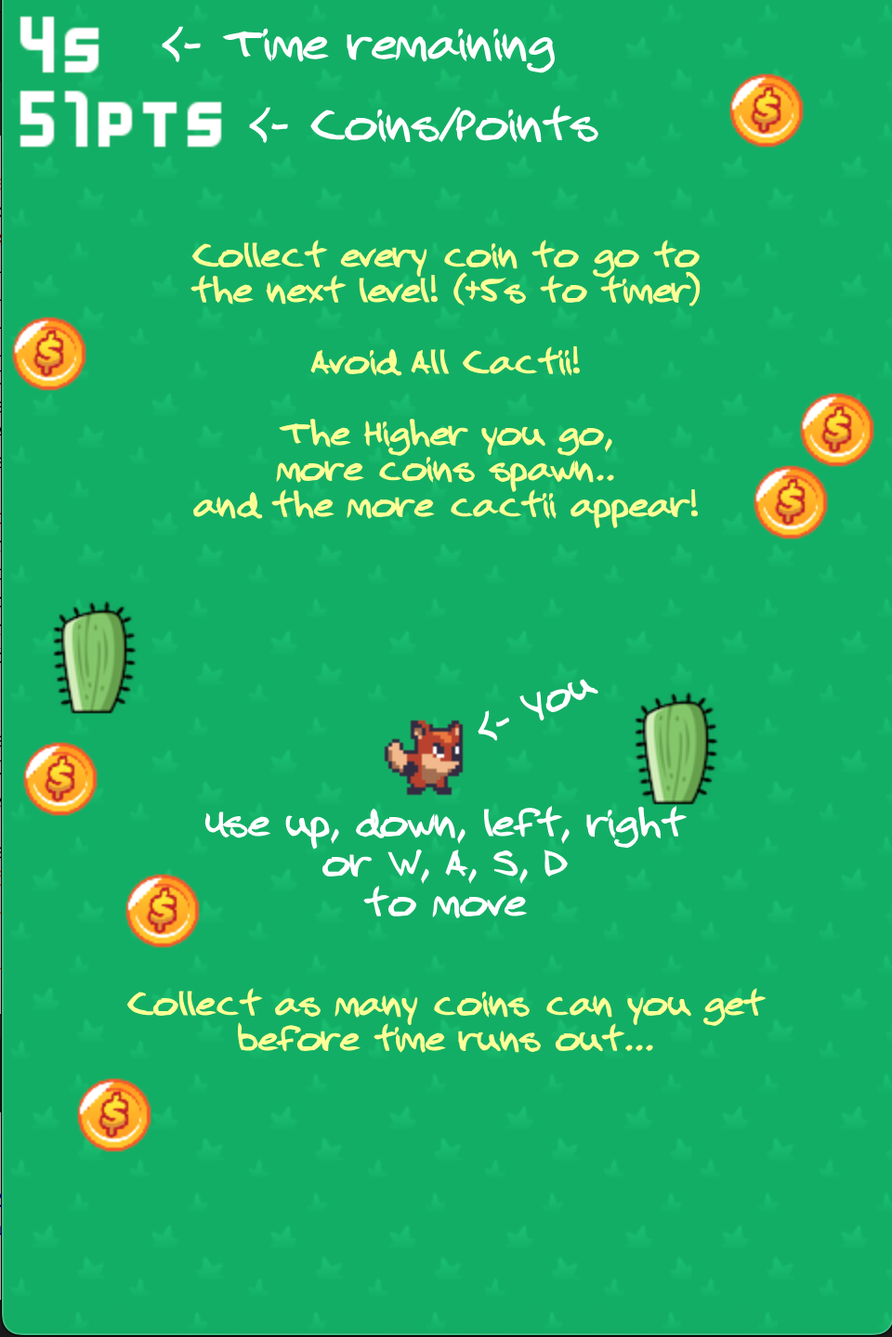
<style>
.page{position:relative;width:892px;height:1337px;background:#13ae65}
.page>*{position:absolute;margin:0}
.t1{font:39px "2Dumb";color:#ffffff}
.t2{font:29.7px "2Dumb";color:#fdffa4}
.t3{font:33.4px "2Dumb";color:#ffffff}
</style>
<div class="page">
<p class="t1" style="left:161px;top:25px;width:395px;height:49px">&lt;- Time remaining</p>
<p class="t1" style="left:248px;top:104px;width:351px;height:40px">&lt;- Coins/Points</p>
<p class="t2" style="left:189px;top:239px;width:512px;height:290px;text-align:center">Collect every coin to go to<br>the next level! (+5s to timer)<br><br>Avoid All Cactii!<br><br>The Higher you go,<br>more coins spawn..<br>and the more cactii appear!</p>
<p class="t3" style="left:476px;top:677px;width:124px;height:66px;rotate:-24deg">&lt;- You</p>
<p class="t3" style="left:203px;top:805px;width:484px;height:114px;text-align:center">Use up, down, left, right<br>or W, A, S, D<br>to move</p>
<p class="t2" style="left:125px;top:987px;width:641px;height:67px;text-align:center">Collect as many coins can you get<br>before time runs out...</p>
</div>
